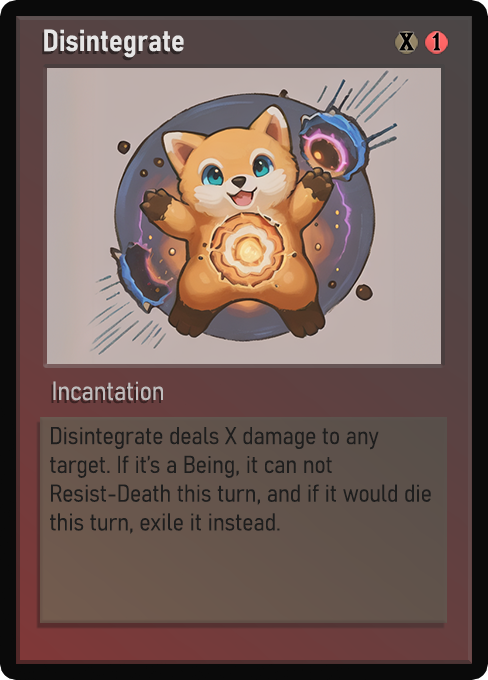
<style>
.page{position:relative;width:488px;height:680px}
.page>*{position:absolute;margin:0}
.t1{font:30px "Bahnschrift-SemiBoldSemiCondensed";color:#f2f2f2;font-weight:bold}
.t2{font:25px "WTRRoycroft";color:#000000;font-weight:bold;scale:1.09 1}
.t3{font:26px "Bahnschrift-LightSemiCondensed";color:#c8c8c8;font-weight:bold}
.t4{font:24px "Bahnschrift-LightSemiCondensed";color:#1e1e1e;font-weight:bold}
</style>
<div class="page">
<p class="t1" style="left:44px;top:29px;width:140px;height:29px;opacity:0.9">Disintegrate</p>
<p class="t2" style="left:399px;top:32px;width:15px;height:19px">X</p>
<p class="t2" style="left:432px;top:32px;width:9px;height:19px">1</p>
<p class="t3" style="left:53px;top:381px;width:110px;height:20px;opacity:0.9">Incantation</p>
<p class="t4" style="left:50px;top:427px;width:381px;height:107px">Disintegrate deals X damage to any target. If it’s a Being, it can not Resist-Death this turn, and if it would die this turn, exile it instead.</p>
</div>
